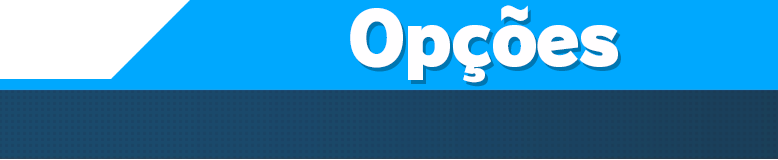
<style>
.page{position:relative;width:778px;height:160px;background:#00a8fe}
.page>*{position:absolute;margin:0}
.t1{font:72px "RodinPro-UB";letter-spacing:-0.044em;color:#fffeff}
</style>
<div class="page">
<p class="t1" style="left:350px;top:5px;width:268px;height:78px">Opções</p>
</div>
